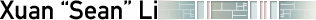
<style>
.page{position:relative;width:316px;height:20px;background:#ffffff}
.page>*{position:absolute;margin:0}
.t1{font:26px "AlteDIN1451Mittelschrift";color:#000000}
</style>
<div class="page">
<p class="t1" style="left:0px;top:0px;width:157px;height:20px">Xuan “Sean” Li</p>
</div>
